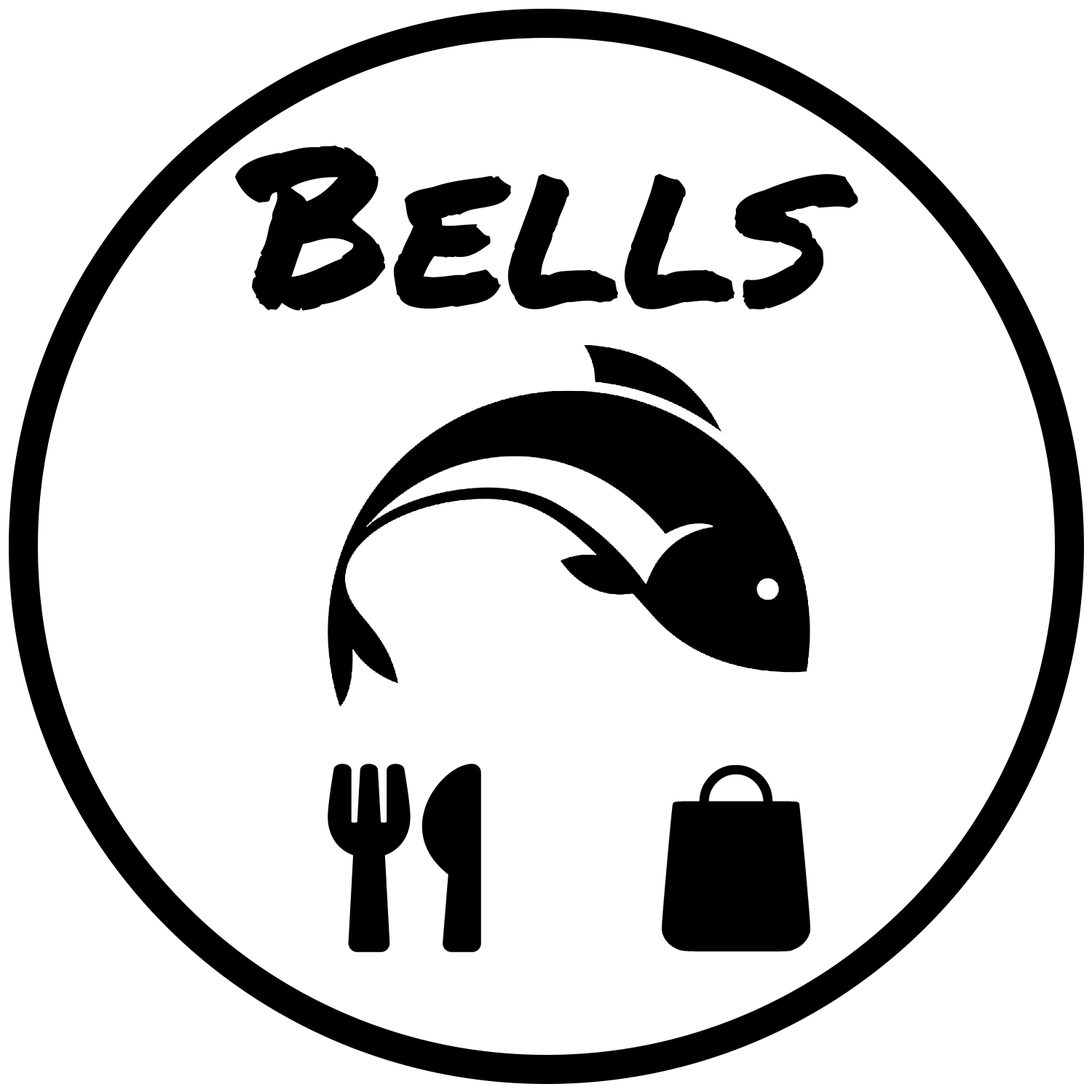
<style>
.page{position:relative;width:1092px;height:1092px;background:#ffffff}
.page>*{position:absolute;margin:0}
.t1{font:218.4px "PermanentMarker-Regular";color:#000000}
</style>
<div class="page">
<p class="t1" style="left:234px;top:145px;width:624px;height:166px">Bells</p>
</div>
